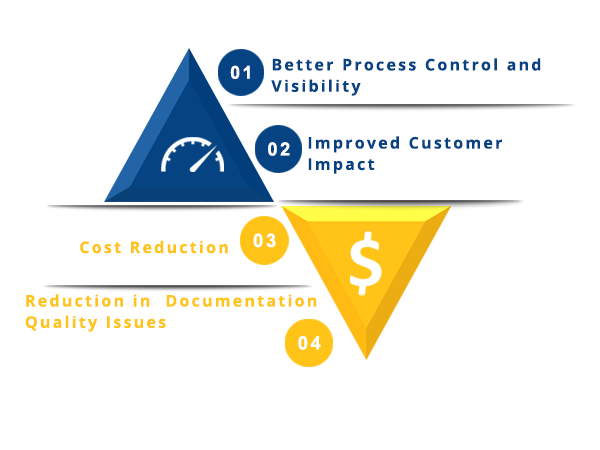
<style>
.page{position:relative;width:600px;height:450px;background:#ffffff}
.page>*{position:absolute;margin:0}
.t1{font:17.8px "Arial-BoldMT";letter-spacing:0.14em;color:#ffffff}
.t2{font:16px/21.3px "OpenSans-Bold";letter-spacing:0.14em;color:#054383}
.t3{font:18.2px "Arial-BoldMT";letter-spacing:0.14em;color:#ffffff}
.t4{font:18.6px "Arial-BoldMT";letter-spacing:0.14em;color:#ffffff}
.t5{font:16px "OpenSans-Bold";letter-spacing:0.14em;color:#ffc417}
.t6{font:16px/21.3px "OpenSans-Bold";letter-spacing:0.14em;color:#ffc417}
.t7{font:18.5px "Arial-BoldMT";letter-spacing:0.14em;color:#ffffff}
</style>
<div class="page">
<p class="t1" style="left:230px;top:65px;width:20px;height:14px">01</p>
<p class="t2" style="left:271px;top:58px;width:270px;height:38px">Better Process Control and <br>Visibility</p>
<p class="t2" style="left:308px;top:136px;width:195px;height:38px">Improved Customer <br>Impact</p>
<p class="t3" style="left:268px;top:142px;width:22px;height:14px">02</p>
<p class="t4" style="left:253px;top:233px;width:23px;height:15px">03</p>
<p class="t5" style="left:80px;top:240px;width:148px;height:14px">Cost Reduction</p>
<p class="t6" style="left:25px;top:294px;width:292px;height:38px">Reduction in  Documentation <br>Quality Issues</p>
<p class="t7" style="left:298px;top:336px;width:23px;height:14px">04</p>
</div>
